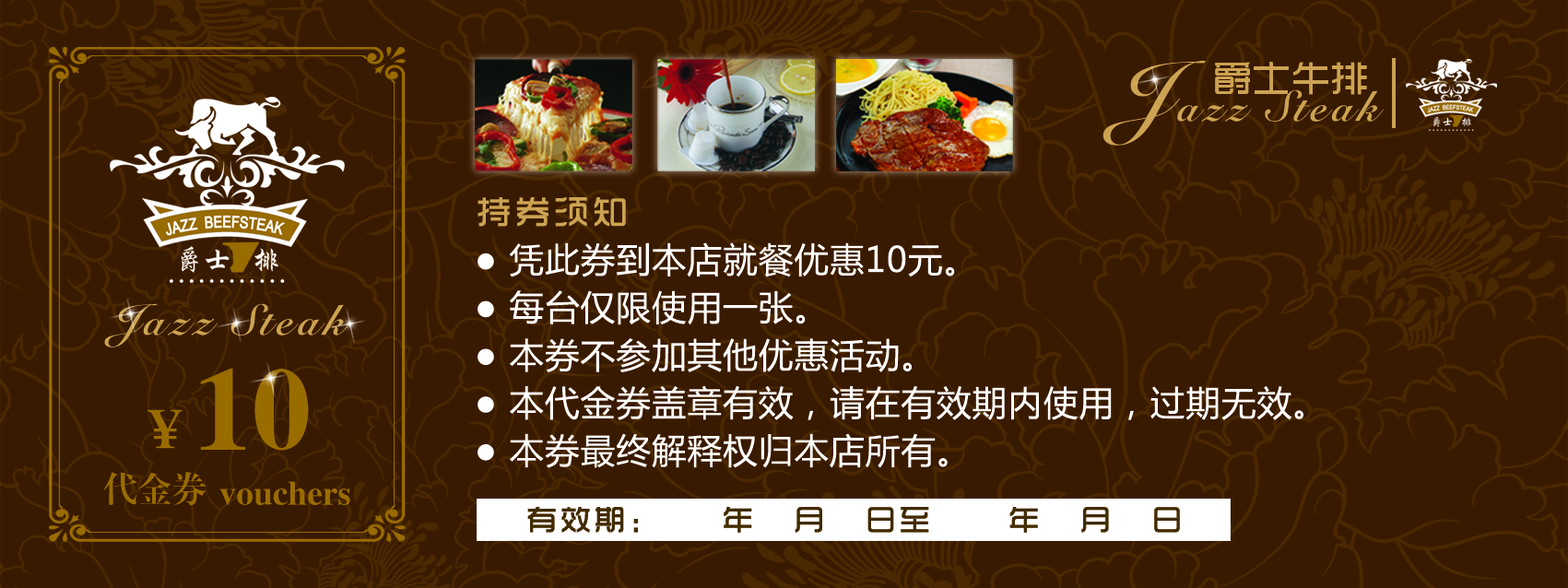
<style>
.page{position:relative;width:1568px;height:588px;background:#381a00}
.page>*{position:absolute;margin:0}
.t1{font:44.2px "SnellBT-Bold";letter-spacing:0.08em;color:#cca352}
.t2{font:86.5px "SnellBT-Bold";letter-spacing:-0.06em;color:#cca352}
.t3{font:38.4px "TRENDS";letter-spacing:0.02em;color:#cca352}
.t4{font:34.6px "TRENDS";letter-spacing:0.12em;color:#cca352}
.t5{font:34.6px/47.7px "MicrosoftYaHei";letter-spacing:0.03em;color:#ffffff}
.t6{font:118.1px "FZXBSJW--GB1-0";color:#996c00}
.t7{font:56.6px "FZXBSJW--GB1-0";color:#996c00}
.t8{font:34.6px "FZXBSJW--GB1-0";color:#996c00}
.t9{font:34.6px "FZXBSJW--GB1-0";letter-spacing:0.36em;color:#996c00}
.t10{font:30.3px "TRENDS";letter-spacing:0.12em;color:#412b00}
</style>
<div class="page">
<p class="t1" style="left:1102px;top:60px;width:282px;height:86px"><span class="t2">J</span>azz Steak</p>
<p class="t3" style="left:1215px;top:62px;width:152px;height:33px">爵士牛排</p>
<p class="t4" style="left:477px;top:197px;width:149px;height:30px">持券须知</p>
<p class="t5" style="left:477px;top:242px;width:826px;height:226px">● 凭此券到本店就餐优惠10元。<br>● 每台仅限使用一张。<br>● 本券不参加其他优惠活动。<br>● 本代金券盖章有效，请在有效期内使用，过期无效。<br>● 本券最终解释权归本店所有。</p>
<p class="t1" style="left:104px;top:303px;width:246px;height:45px">Jazz Steak</p>
<p class="t6" style="left:147px;top:368px;width:162px;height:83px"><span class="t7">￥</span>10</p>
<p class="t8" style="left:103px;top:472px;width:247px;height:34px">代金<span class="t9">券</span>vouchers</p>
<p class="t10" style="left:527px;top:507px;width:653px;height:26px">有效期:    年  月  日至    年  月  日</p>
</div>
